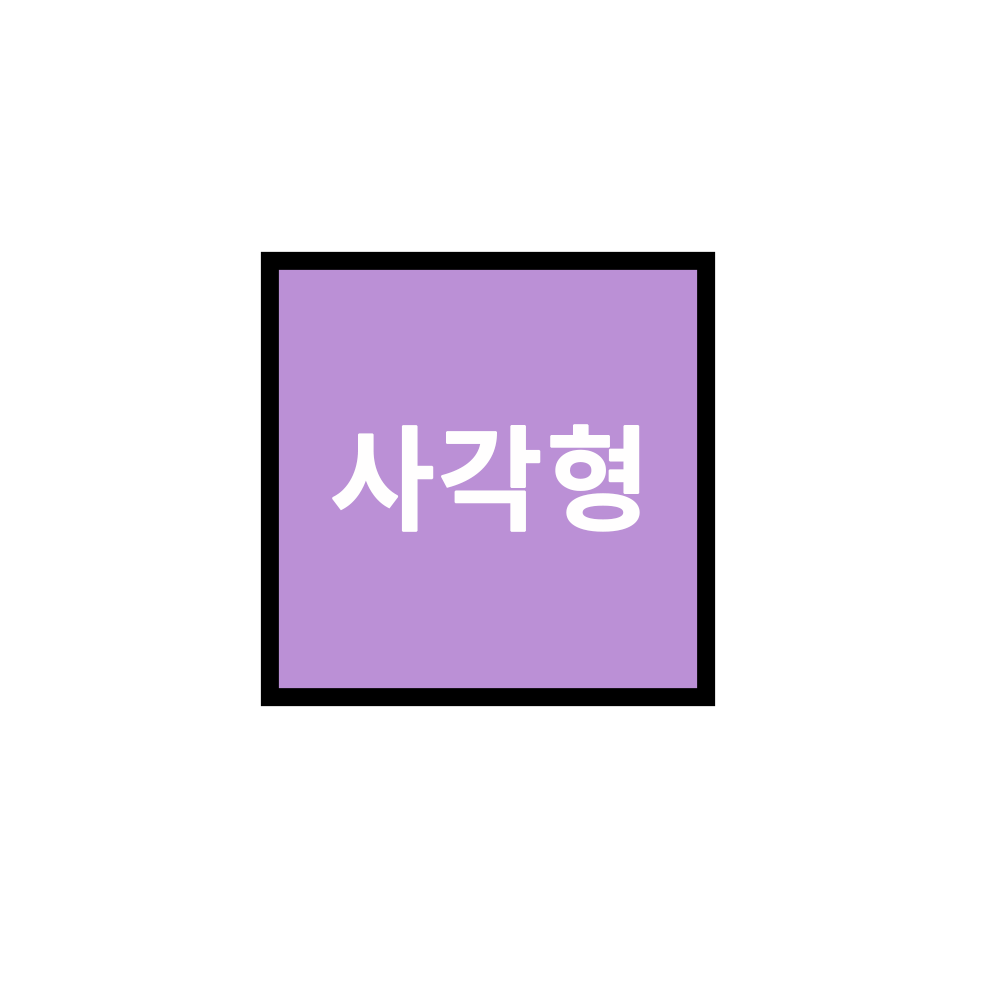
<style>
.page{position:relative;width:1000px;height:1000px;background:#ffffff}
.page>*{position:absolute;margin:0}
.t1{font:113.8px "NotoSansKR-SemiBold";color:#fffefe;font-weight:bold}
</style>
<div class="page">
<p class="t1" style="left:332px;top:424px;width:308px;height:108px">사각형</p>
</div>
